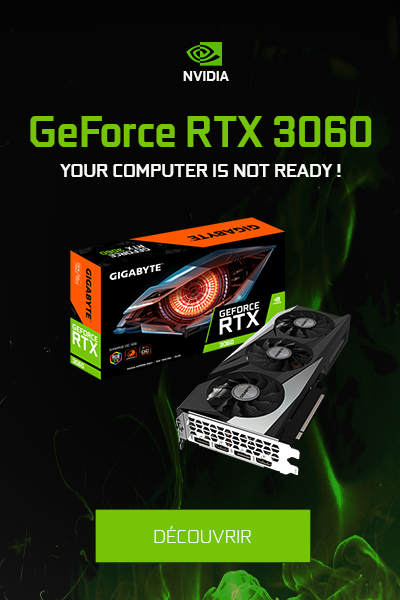
<style>
.page{position:relative;width:400px;height:600px}
.page>*{position:absolute;margin:0}
.t1{font:14.2px "GeForce-Bold-Alt";color:#f7f9f5}
.t2{font:44.6px "GeForce-Bold-Alt";color:#75c408;scale:0.94 1}
.t3{font:18.7px "GeForce-Bold-Alt";color:#f7f9f5;text-transform:uppercase}
.t4{font:19px "GeForce-Light-Alt";color:#f8fbf5;text-transform:uppercase}
</style>
<div class="page">
<p class="t1" style="left:183px;top:71px;width:46px;height:10px">NVIDIA</p>
<p class="t2" style="left:30px;top:116px;width:342px;height:31px">GeForce RTX 3060</p>
<p class="t3" style="left:60px;top:164px;width:281px;height:13px">your computer is not ready !</p>
<p class="t4" style="left:154px;top:526px;width:97px;height:17px">Découvrir</p>
</div>
